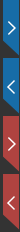
<style>
.page{position:relative;width:20px;height:232px;background:#af4340}
.page>*{position:absolute;margin:0}
.t1{font:18px "LetterGothicStd-Bold";color:#ffffff}
</style>
<div class="page">
<p class="t1" style="left:8px;top:21px;width:8px;height:14px">&gt;</p>
<p class="t1" style="left:7px;top:80px;width:8px;height:14px;rotate:180deg">&gt;</p>
<p class="t1" style="left:8px;top:137px;width:8px;height:14px">&gt;</p>
<p class="t1" style="left:7px;top:196px;width:8px;height:14px;rotate:180deg">&gt;</p>
</div>
